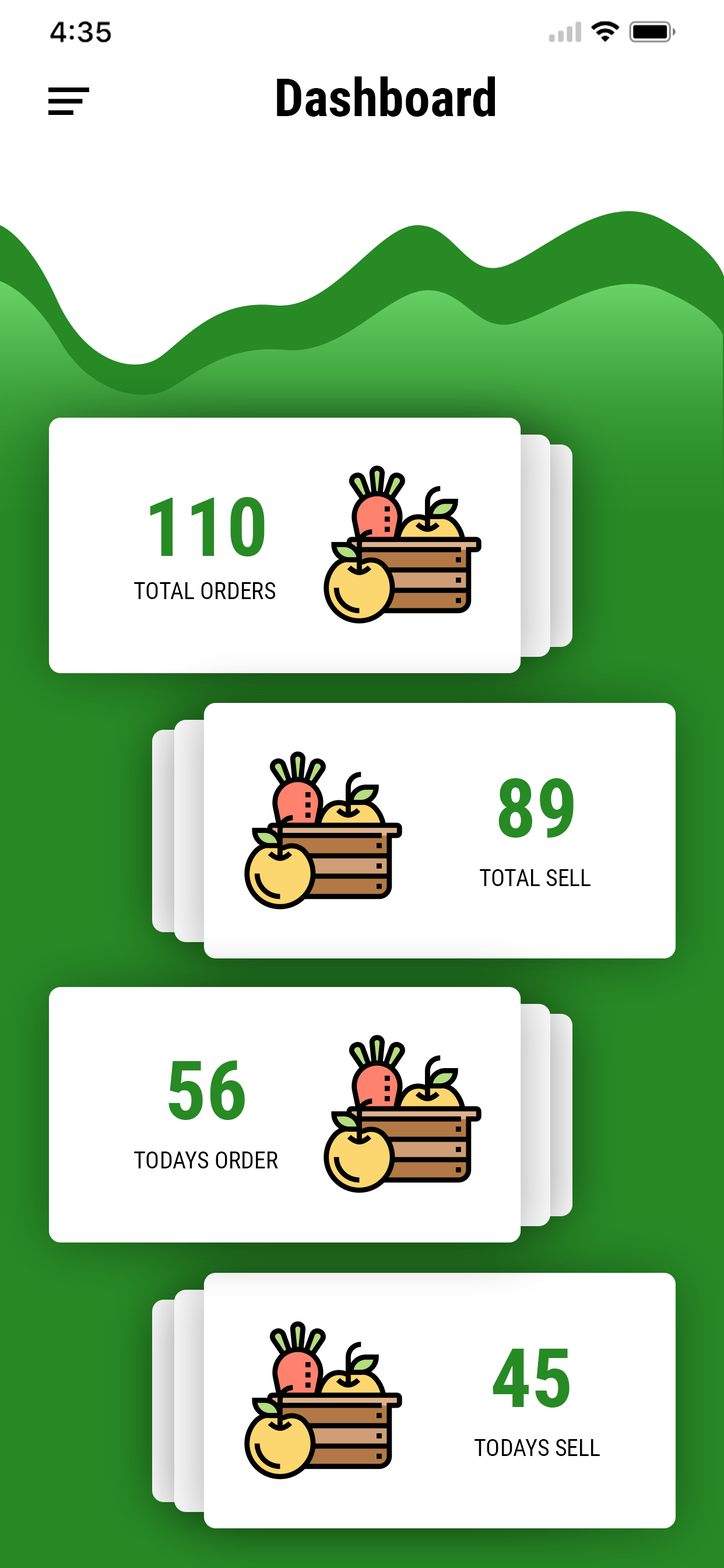
<style>
.page{position:relative;width:724px;height:1568px;background:#ffffff}
.page>*{position:absolute;margin:0}
.t1{font:52.5px "RobotoCondensed-Bold";color:#000000}
.t2{font:81.7px "RobotoCondensed-Bold";color:#278a25;text-transform:uppercase}
.t3{font:23.3px "RobotoCondensed-Regular";color:#000000;text-transform:uppercase}
</style>
<div class="page">
<p class="t1" style="left:277px;top:76px;width:218px;height:41px">Dashboard</p>
<p class="t2" style="left:150px;top:497px;width:115px;height:59px">110</p>
<p class="t3" style="left:134px;top:582px;width:142px;height:17px">Total Orders</p>
<p class="t2" style="left:499px;top:778px;width:75px;height:60px">89</p>
<p class="t3" style="left:480px;top:869px;width:111px;height:17px">Total Sell</p>
<p class="t2" style="left:169px;top:1060px;width:76px;height:60px">56</p>
<p class="t3" style="left:134px;top:1152px;width:144px;height:16px">Todays Order</p>
<p class="t2" style="left:493px;top:1349px;width:77px;height:59px">45</p>
<p class="t3" style="left:475px;top:1439px;width:125px;height:17px">Todays Sell</p>
</div>
